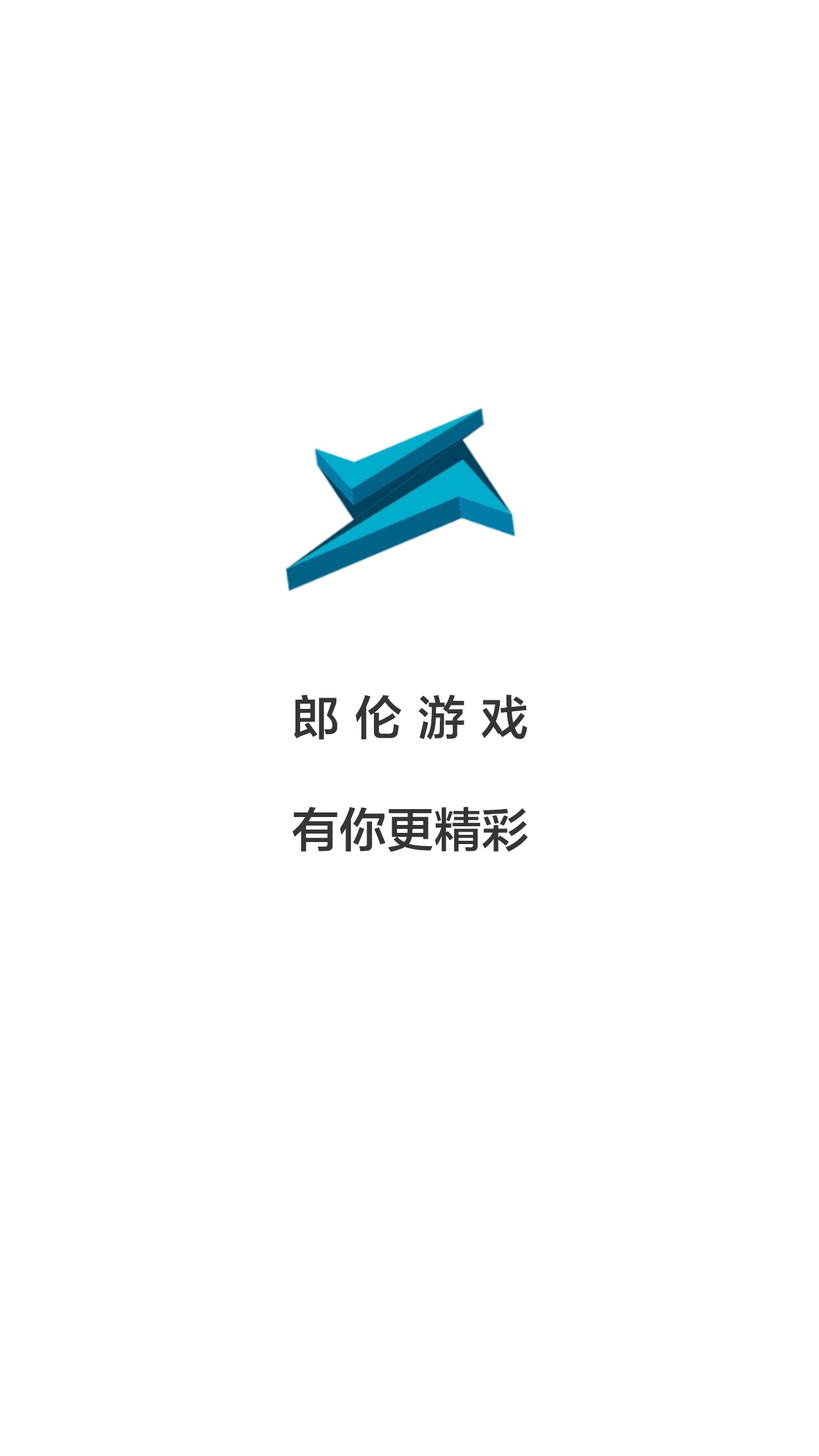
<style>
.page{position:relative;width:819px;height:1456px;background:#ffffff}
.page>*{position:absolute;margin:0}
.t1{font:47.5px/112.1px "FZLTZHK--GBK1-0";color:#343535}
.t2{font:47.5px/112.1px "FZLTZHK--GBK1-0";letter-spacing:0.33em;color:#343535}
</style>
<div class="page">
<p class="t1" style="left:292px;top:694px;width:236px;height:158px"><span class="t2">郎伦游戏<br></span>有你更精彩</p>
</div>
